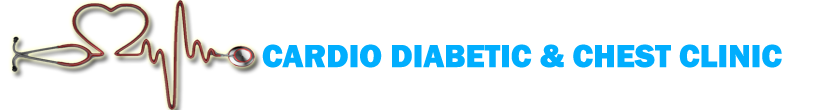
<style>
.page{position:relative;width:827px;height:110px;background:#ffffff}
.page>*{position:absolute;margin:0}
.t1{font:33px "FranklinGothic-Heavy";color:#01aefe}
</style>
<div class="page">
<p class="t1" style="left:262px;top:44px;width:520px;height:24px">CARDIO DIABETIC &amp; CHEST CLINIC</p>
</div>
